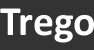
<style>
.page{position:relative;width:94px;height:50px;background:#333333}
.page>*{position:absolute;margin:0}
.t1{font:41.7px "Calibri-Bold";color:#ffffff}
</style>
<div class="page">
<p class="t1" style="left:0px;top:8px;width:94px;height:35px">Trego</p>
</div>
